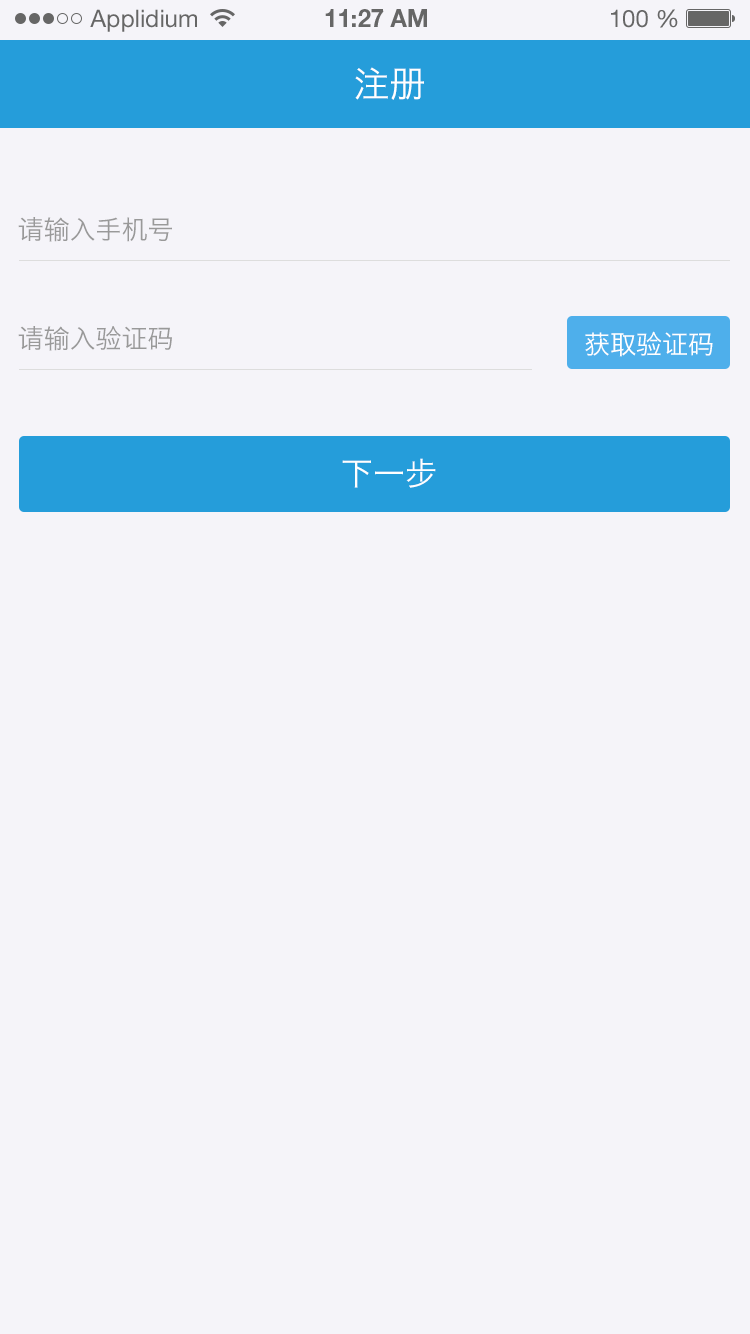
<style>
.page{position:relative;width:750px;height:1334px;background:#f5f4f9}
.page>*{position:absolute;margin:0}
.t1{font:24px "HelveticaNeueLTStd-Roman";color:#666666}
.t2{font:24px "HelveticaNeueLTStd-Bd";color:#666666}
.t3{font:36px "HiraginoSansGB-W3";color:#ffffff;text-transform:uppercase}
.t4{font:26px "HiraginoSansGB-W3";color:#999999;text-transform:uppercase}
.t5{font:26px "HiraginoSansGB-W3";color:#ffffff;text-transform:uppercase}
.t6{font:32px "HiraginoSansGB-W3";color:#ffffff;text-transform:uppercase}
</style>
<div class="page">
<p class="t1" style="left:90px;top:9px;width:107px;height:23px">Applidium</p>
<p class="t2" style="left:325px;top:9px;width:102px;height:18px">11:27 AM</p>
<p class="t1" style="left:611px;top:9px;width:67px;height:19px">100 %</p>
<p class="t3" style="left:355px;top:67px;width:69px;height:33px">注册</p>
<p class="t4" style="left:18px;top:217px;width:154px;height:25px">请输入手机号</p>
<p class="t4" style="left:18px;top:326px;width:154px;height:25px">请输入验证码</p>
<p class="t5" style="left:585px;top:331px;width:128px;height:26px">获取验证码</p>
<p class="t6" style="left:342px;top:458px;width:94px;height:30px">下一步</p>
</div>
